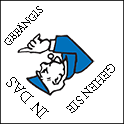
<style>
.page{position:relative;width:124px;height:124px;background:#ffffff}
.page>*{position:absolute;margin:0}
.t1{font:12px "AdobeDevanagari-Regular";color:#000000}
.t2{font:14px "AdobeDevanagari-Regular";color:#000000}
.t3{font:18px "AdobeDevanagari-Regular";color:#000000}
</style>
<div class="page">
<p class="t1" style="left:4px;top:6px;width:39px;height:39px;rotate:-45deg">GEFÄNGIS</p>
<p class="t2" style="left:66px;top:64px;width:49px;height:49px;rotate:135deg">GEHEN SIE</p>
<p class="t3" style="left:6px;top:77px;width:43px;height:42px;rotate:-136deg">IN DAS</p>
</div>
